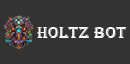
<style>
.page{position:relative;width:130px;height:64px;background:#333333}
.page>*{position:absolute;margin:0}
.t1{font:17.5px "Algerian";color:#ffffff}
</style>
<div class="page">
<p class="t1" style="left:37px;top:27px;width:90px;height:11px">HOLTZ BOT</p>
</div>
